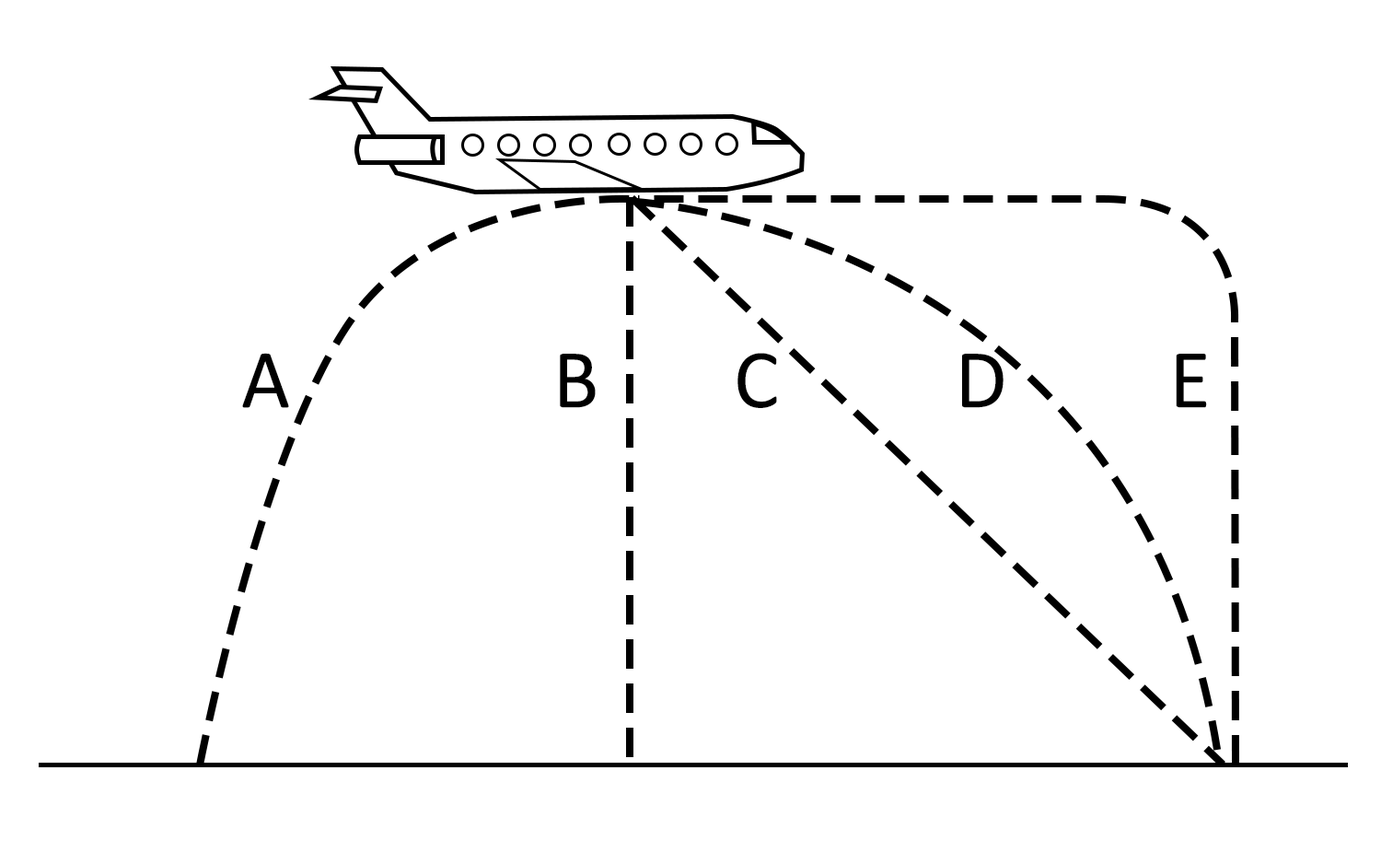
<style>
.page{position:relative;width:1381px;height:864px;background:#ffffff}
.page>*{position:absolute;margin:0}
.t1{font:84.4px "Calibri";color:#000000}
</style>
<div class="page">
<p class="t1" style="left:242px;top:353px;width:47px;height:55px">A</p>
<p class="t1" style="left:560px;top:354px;width:36px;height:54px">B</p>
<p class="t1" style="left:737px;top:353px;width:40px;height:55px">C</p>
<p class="t1" style="left:962px;top:354px;width:41px;height:54px">D</p>
<p class="t1" style="left:1176px;top:354px;width:31px;height:54px">E</p>
</div>
